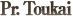
<style>
.page{position:relative;width:73px;height:18px;background:#ffffff}
.page>*{position:absolute;margin:0}
.t1{font:18px "RyuminPro-ExBold";letter-spacing:-0.1em;color:#4a3f32;font-weight:bold;scale:0.9 1}
</style>
<div class="page">
<p class="t1" style="left:0px;top:1px;width:72px;height:15px">Pr. Toukai</p>
</div>
